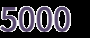
<style>
.page{position:relative;width:90px;height:38px;background:#000000}
.page>*{position:absolute;margin:0}
.t1{font:32px "WebPSD-18463539-0-Regular";color:#59496e;font-weight:bold}
</style>
<div class="page">
<p class="t1" style="left:0px;top:0px;width:90px;height:38px">5000</p>
</div>
